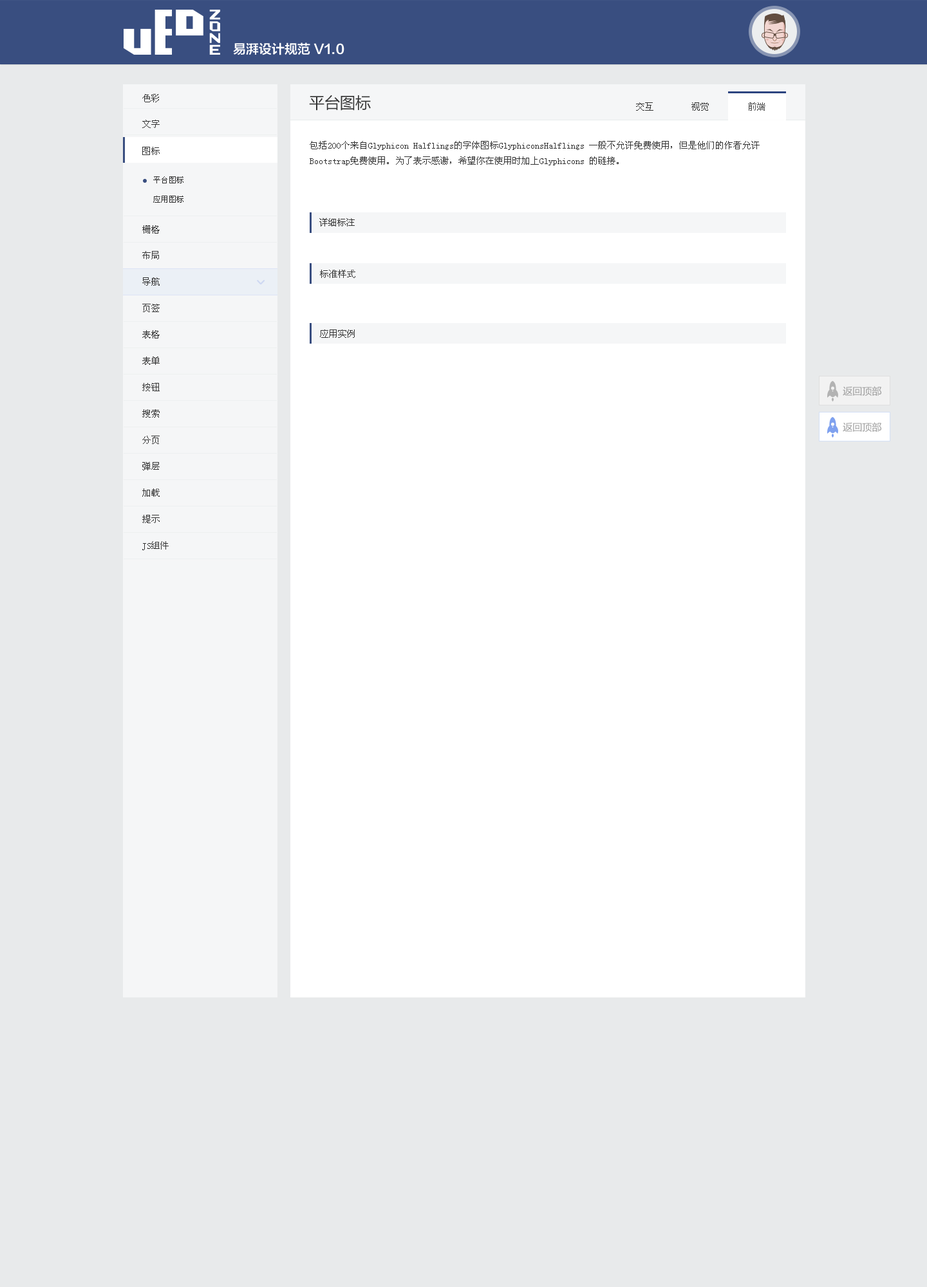
<style>
.page{position:relative;width:927px;height:1287px;background:#e8eaeb}
.page>*{position:absolute;margin:0}
.t1{font:12.9px "FZLTZCHJW--GB1-0";color:#ffffff}
.t2{font:9px "SimSun";color:#333333}
.t3{font:15.4px "MicrosoftYaHei";color:#333333}
.t4{font:9px "SimSun";color:#4d4d4d}
.t5{font:9px/15.4px "SimSun";color:#333333}
.t6{font:7.7px/19.3px "SimSun";color:#333333}
.t7{font:9.7px "MicrosoftYaHei";color:#999999}
</style>
<div class="page">
<p class="t1" style="left:233px;top:42px;width:111px;height:13px">易湃设计规范 V1.0</p>
<p class="t2" style="left:142px;top:94px;width:17px;height:8px">色彩</p>
<p class="t3" style="left:309px;top:95px;width:62px;height:16px">平台图标</p>
<p class="t2" style="left:636px;top:102px;width:17px;height:9px">交互</p>
<p class="t2" style="left:691px;top:102px;width:17px;height:9px">视觉</p>
<p class="t4" style="left:748px;top:102px;width:17px;height:9px">前端</p>
<p class="t2" style="left:142px;top:120px;width:18px;height:8px">文字</p>
<p class="t2" style="left:142px;top:147px;width:18px;height:8px">图标</p>
<p class="t5" style="left:310px;top:141px;width:449px;height:24px">包括200个来自Glyphicon Halflings的字体图标GlyphiconsHalflings 一般不允许免费使用，但是他们的作者允许<br>Bootstrap免费使用。为了表示感谢，希望你在使用时加上Glyphicons 的链接。</p>
<p class="t6" style="left:153px;top:176px;width:30px;height:27px">平台图标<br>应用图标</p>
<p class="t2" style="left:319px;top:218px;width:36px;height:8px">详细标注</p>
<p class="t2" style="left:142px;top:225px;width:18px;height:9px">栅格</p>
<p class="t2" style="left:142px;top:251px;width:17px;height:8px">布局</p>
<p class="t2" style="left:320px;top:270px;width:35px;height:8px">标准样式</p>
<p class="t2" style="left:142px;top:277px;width:18px;height:9px">导航</p>
<p class="t2" style="left:142px;top:304px;width:18px;height:8px">页签</p>
<p class="t2" style="left:320px;top:329px;width:35px;height:9px">应用实例</p>
<p class="t2" style="left:142px;top:330px;width:18px;height:8px">表格</p>
<p class="t2" style="left:142px;top:356px;width:18px;height:9px">表单</p>
<p class="t2" style="left:142px;top:383px;width:18px;height:8px">按钮</p>
<p class="t7" style="left:842px;top:386px;width:39px;height:10px">返回顶部</p>
<p class="t2" style="left:142px;top:409px;width:18px;height:9px">搜索</p>
<p class="t7" style="left:842px;top:422px;width:39px;height:10px">返回顶部</p>
<p class="t2" style="left:142px;top:436px;width:18px;height:8px">分页</p>
<p class="t2" style="left:142px;top:462px;width:18px;height:8px">弹层</p>
<p class="t2" style="left:142px;top:488px;width:18px;height:9px">加载</p>
<p class="t2" style="left:142px;top:515px;width:18px;height:8px">提示</p>
<p class="t2" style="left:142px;top:541px;width:27px;height:9px">JS组件</p>
</div>
